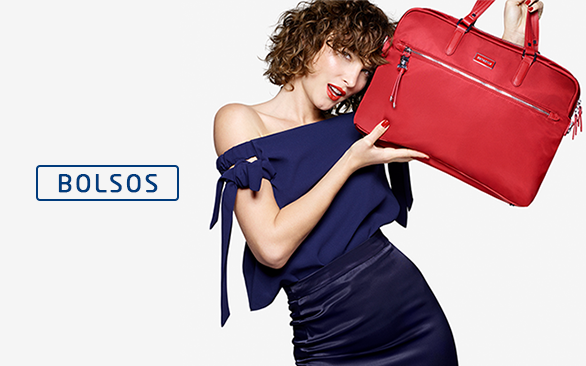
<style>
.page{position:relative;width:586px;height:366px;background:#f5f5f5}
.page>*{position:absolute;margin:0}
.t1{font:24px "NeoSansPro-Regular";letter-spacing:0.1em;color:#003b7c;font-weight:bold}
</style>
<div class="page">
<p class="t1" style="left:58px;top:174px;width:100px;height:19px">BOLSOS</p>
</div>
